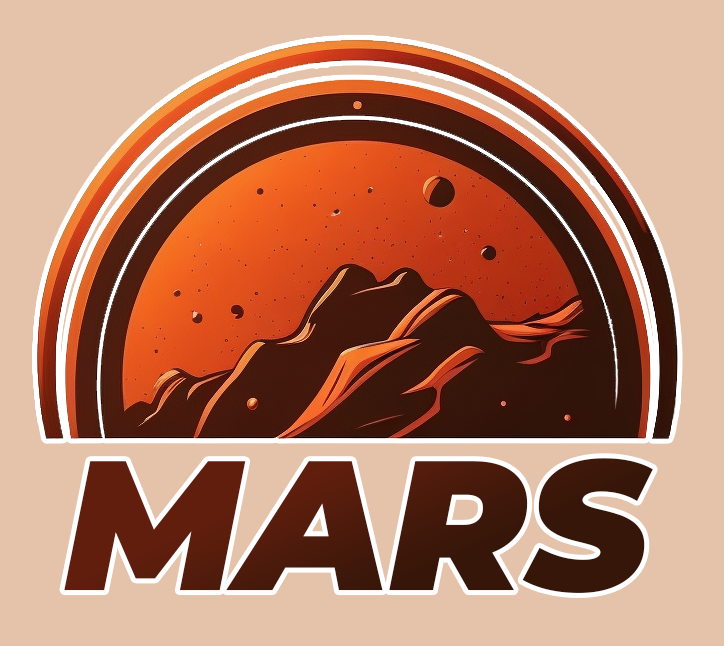
<style>
.page{position:relative;width:724px;height:646px;background:#e5c2aa}
.page>*{position:absolute;margin:0}
.t1{font:184px "Montserrat-BlackItalic";color:#491a0b}
</style>
<div class="page">
<p class="t1" style="left:64px;top:458px;width:589px;height:135px">MARS</p>
</div>
